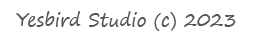
<style>
.page{position:relative;width:255px;height:43px;background:#ffffff}
.page>*{position:absolute;margin:0}
.t1{font:18px "SegoePrint";color:#555555}
</style>
<div class="page">
<p class="t1" style="left:16px;top:11px;width:220px;height:20px">Yesbird Studio (c) 2023</p>
</div>
